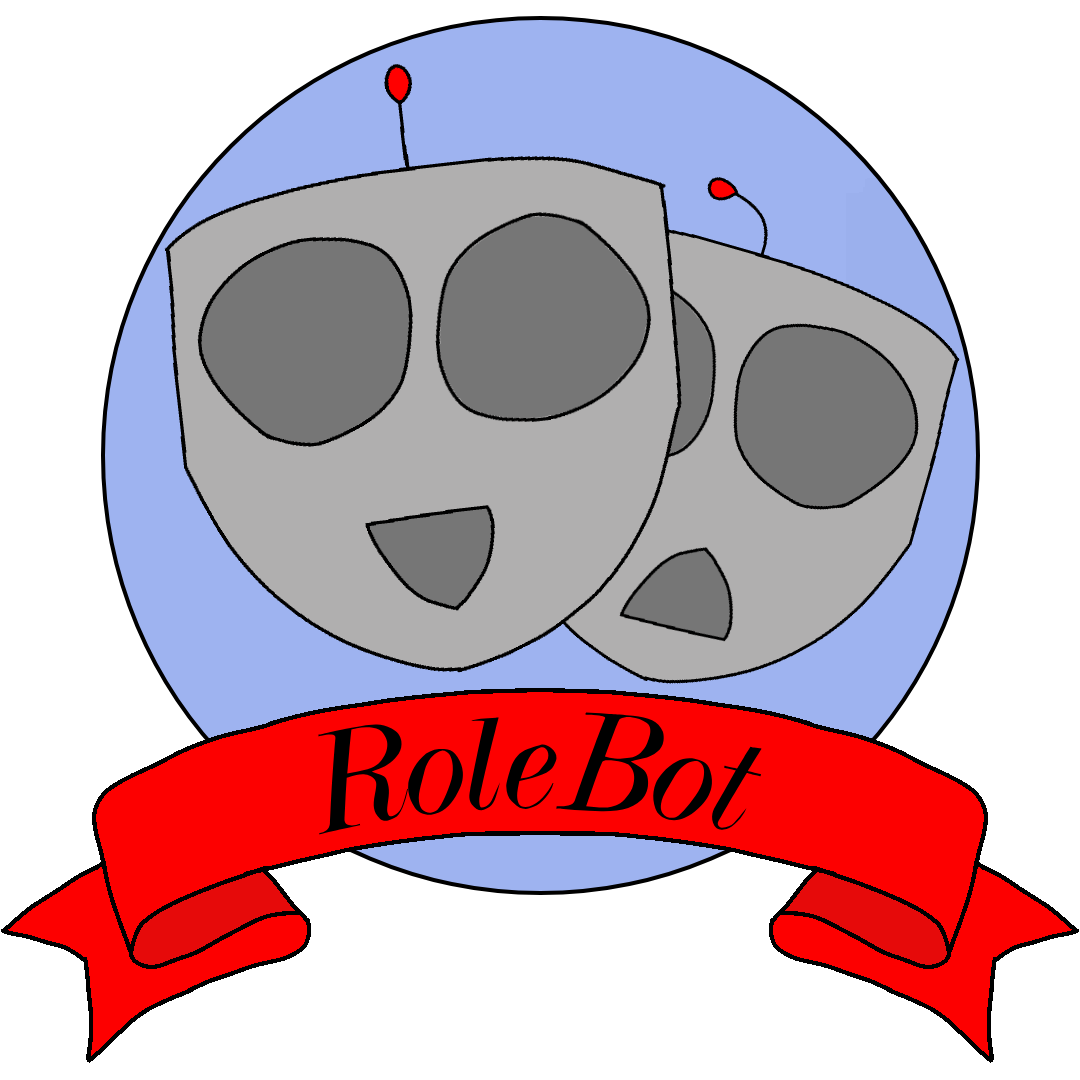
<style>
.page{position:relative;width:1080px;height:1080px;background:#ffffff}
.page>*{position:absolute;margin:0}
.t1{font:150px "Dubiel-Italic";color:#000000}
</style>
<div class="page">
<p class="t1" style="left:318px;top:712px;width:444px;height:123px">RoleBot</p>
</div>
